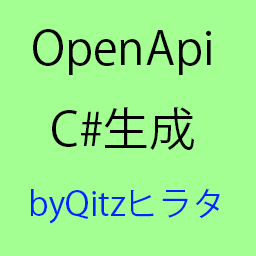
<style>
.page{position:relative;width:256px;height:256px;background:#a3ff91}
.page>*{position:absolute;margin:0}
.t1{font:45.8px "KozGoPr6N-Regular";color:#000000}
.t2{font:33.3px "KozGoPr6N-Regular";color:#0024ff}
</style>
<div class="page">
<p class="t1" style="left:33px;top:29px;width:178px;height:121px;text-align:center">OpenApi<br>C#生成</p>
<p class="t2" style="left:31px;top:188px;width:189px;height:36px">byQitzヒラタ</p>
</div>
